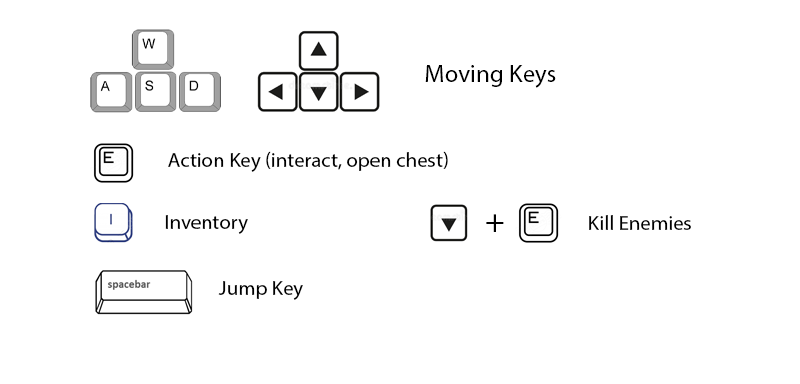
<style>
.page{position:relative;width:800px;height:384px;background:#ffffff}
.page>*{position:absolute;margin:0}
.t1{font:25px "MyriadPro-Regular";color:#000000}
.t2{font:20.8px "MyriadPro-Regular";color:#000000}
.t3{font:33.3px "MyriadPro-Regular";color:#000000}
</style>
<div class="page">
<p class="t1" style="left:425px;top:65px;width:131px;height:23px">Moving Keys</p>
<p class="t2" style="left:168px;top:151px;width:280px;height:21px">Action Key (interact, open chest)</p>
<p class="t2" style="left:165px;top:215px;width:83px;height:19px">Inventory</p>
<p class="t3" style="left:486px;top:214px;width:18px;height:18px">+</p>
<p class="t2" style="left:589px;top:215px;width:102px;height:15px">Kill Enemies</p>
<p class="t2" style="left:218px;top:281px;width:85px;height:19px">Jump Key</p>
</div>
